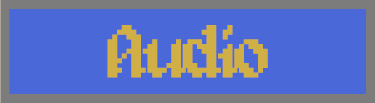
<style>
.page{position:relative;width:375px;height:103px;background:#4a68d7}
.page>*{position:absolute;margin:0}
.t1{font:76.2px "Alagard";letter-spacing:-0.1em;color:#cfaf46}
</style>
<div class="page">
<p class="t1" style="left:107px;top:25px;width:161px;height:53px">Audio</p>
</div>
